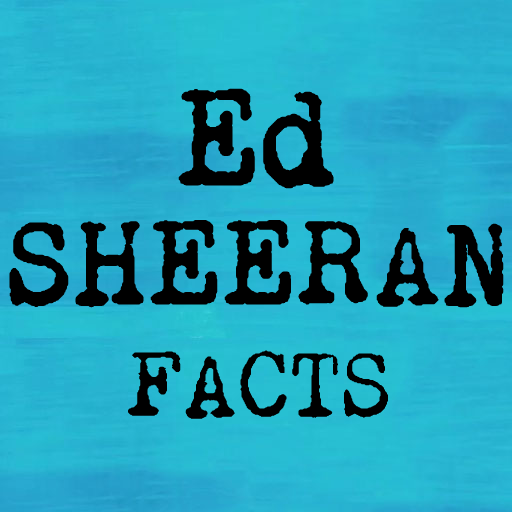
<style>
.page{position:relative;width:512px;height:512px}
.page>*{position:absolute;margin:0}
.t1{font:120px/120px "RemingtonNoiseless";color:#000000;text-transform:uppercase;font-weight:bold}
.t2{font:137px/120px "RemingtonNoiseless";color:#000000;font-weight:bold}
.t3{font:120px/120px "RemingtonNoiseless";color:#000000;text-transform:uppercase}
.t4{font:94.7px "RemingtonNoiseless";color:#000000;text-transform:uppercase}
</style>
<div class="page">
<p class="t1" style="left:9px;top:88px;width:495px;height:331px;text-align:center"><span class="t2">Ed<br></span>Sheer<span class="t3">a</span>n<br><span class="t4">Facts</span></p>
</div>
